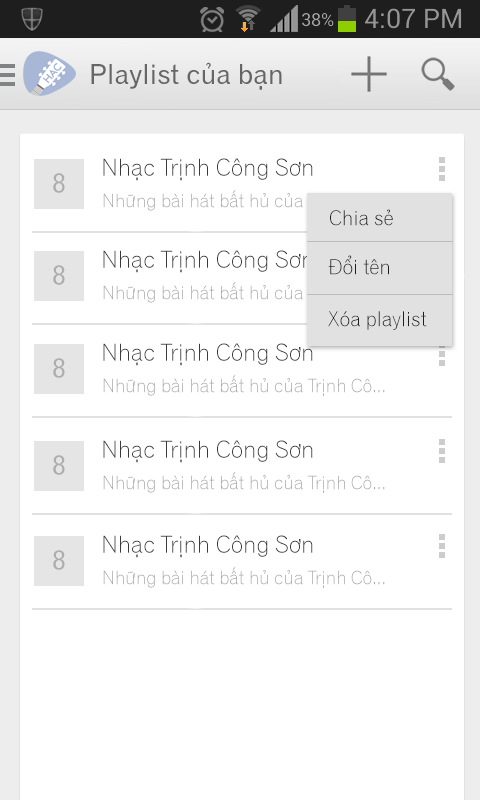
<style>
.page{position:relative;width:480px;height:800px;background:#ffffff}
.page>*{position:absolute;margin:0}
.t1{font:27px "UVNGioMay";color:#666666}
.t2{font:23px "UVNGioMayNhe";color:#3a3a3a}
.t3{font:27px "UVNGioMay";color:#c1c1c1}
.t4{font:18px "UVNGioMayNhe";color:#a5a5a5}
.t5{font:20px "UVNGioMayNhe";color:#1e1e1e}
</style>
<div class="page">
<p class="t1" style="left:91px;top:62px;width:191px;height:28px">Playlist của bạn</p>
<p class="t2" style="left:103px;top:158px;width:210px;height:23px">Nhạc Trịnh Công Sơn</p>
<p class="t3" style="left:53px;top:173px;width:12px;height:20px">8</p>
<p class="t4" style="left:103px;top:190px;width:282px;height:21px">Những bài hát bất hủ của Trịnh Cô...</p>
<p class="t5" style="left:330px;top:209px;width:63px;height:17px">Chia sẻ</p>
<p class="t2" style="left:103px;top:250px;width:210px;height:23px">Nhạc Trịnh Công Sơn</p>
<p class="t5" style="left:328px;top:255px;width:61px;height:20px">Đổi tên</p>
<p class="t3" style="left:53px;top:265px;width:12px;height:20px">8</p>
<p class="t4" style="left:103px;top:282px;width:282px;height:21px">Những bài hát bất hủ của Trịnh Cô...</p>
<p class="t5" style="left:328px;top:311px;width:99px;height:19px">Xóa playlist</p>
<p class="t2" style="left:103px;top:343px;width:210px;height:23px">Nhạc Trịnh Công Sơn</p>
<p class="t3" style="left:53px;top:358px;width:12px;height:20px">8</p>
<p class="t4" style="left:103px;top:375px;width:282px;height:21px">Những bài hát bất hủ của Trịnh Cô...</p>
<p class="t2" style="left:103px;top:440px;width:210px;height:23px">Nhạc Trịnh Công Sơn</p>
<p class="t3" style="left:53px;top:455px;width:12px;height:20px">8</p>
<p class="t4" style="left:103px;top:472px;width:282px;height:21px">Những bài hát bất hủ của Trịnh Cô...</p>
<p class="t2" style="left:103px;top:535px;width:210px;height:23px">Nhạc Trịnh Công Sơn</p>
<p class="t3" style="left:53px;top:550px;width:12px;height:20px">8</p>
<p class="t4" style="left:103px;top:567px;width:282px;height:21px">Những bài hát bất hủ của Trịnh Cô...</p>
</div>
